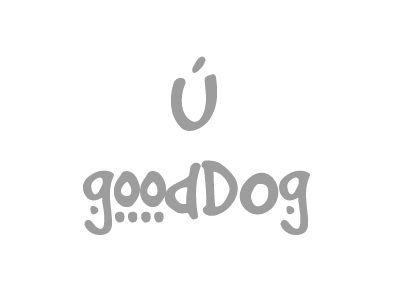
<style>
.page{position:relative;width:400px;height:300px;background:#ffffff}
.page>*{position:absolute;margin:0}
.t1{font:100px "GoodDogCool";letter-spacing:-0.02em;color:#a8a8a8}
</style>
<div class="page">
<p class="t1" style="left:171px;top:56px;width:46px;height:75px">Ú</p>
<p class="t1" style="left:83px;top:160px;width:227px;height:75px">goodDOg</p>
</div>
